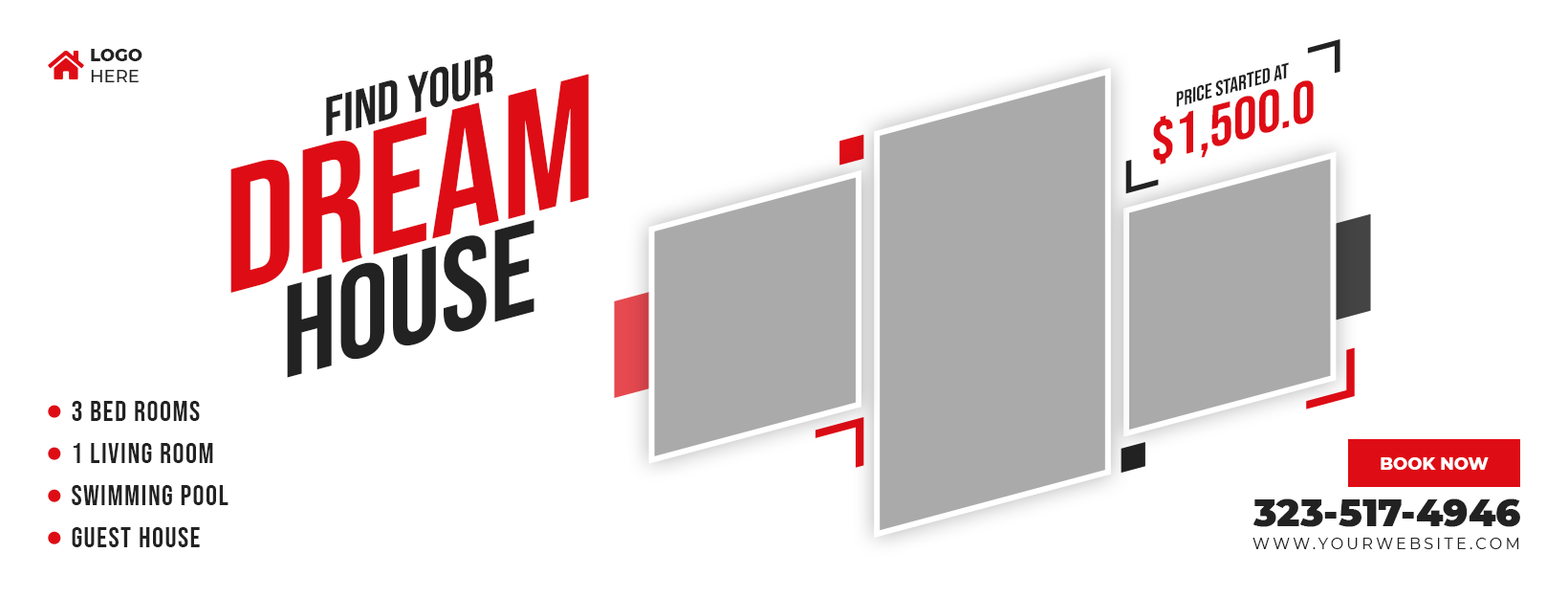
<style>
.page{position:relative;width:1568px;height:597px;background:#ffffff}
.page>*{position:absolute;margin:0}
.t1{font:17.2px "Montserrat-ExtraBold";color:#222222;text-transform:uppercase}
.t2{font:17.2px "Montserrat-Medium";color:#222222;text-transform:uppercase}
.t3{font:55px "BebasNeue-Regular";color:#222222;text-transform:uppercase;scale:1.04 1}
.t4{font:21px "BebasNeue-Regular";color:#222222;scale:1.04 1}
.t5{font:176.3px "BebasNeue-Regular";color:#de0c15;text-transform:uppercase;scale:1.04 1}
.t6{font:59.3px "BebasNeue-Regular";color:#de0c15;scale:1.04 1}
.t7{font:130.5px "BebasNeue-Regular";color:#222222;text-transform:uppercase;scale:1.04 1}
.t8{font:28.7px/42.1px "BebasNeue-Regular";letter-spacing:0.05em;color:#222222;text-transform:uppercase}
.t9{font:17.2px "Montserrat-ExtraBold";color:#ffffff;text-transform:uppercase}
.t10{font:38.2px "Montserrat-Black";color:#222222}
.t11{font:15.3px "Montserrat-Regular";letter-spacing:0.2em;color:#222222;text-transform:uppercase}
</style>
<div class="page">
<p class="t1" style="left:91px;top:49px;width:51px;height:33px">Logo<br><span class="t2">Here</span></p>
<p class="t3" style="left:326px;top:54px;width:167px;height:83px;rotate:-15deg">Find Your</p>
<p class="t4" style="left:1176px;top:62px;width:113px;height:45px;rotate:-15deg">Price Started At</p>
<p class="t5" style="left:230px;top:74px;width:359px;height:219px;rotate:-15deg">Dream</p>
<p class="t6" style="left:1153px;top:80px;width:161px;height:84px;rotate:-15deg">$1,500.0</p>
<p class="t7" style="left:287px;top:219px;width:247px;height:159px;rotate:-15deg">House</p>
<p class="t8" style="left:72px;top:401px;width:157px;height:146px">3 Bed Rooms<br>1 Living Room<br>Swimming Pool<br>Guest House</p>
<p class="t9" style="left:1381px;top:457px;width:108px;height:12px">Book Now</p>
<p class="t10" style="left:1252px;top:498px;width:268px;height:29px">323-517-4946</p>
<p class="t11" style="left:1252px;top:537px;width:267px;height:12px">www.yourwebsite.com</p>
</div>
